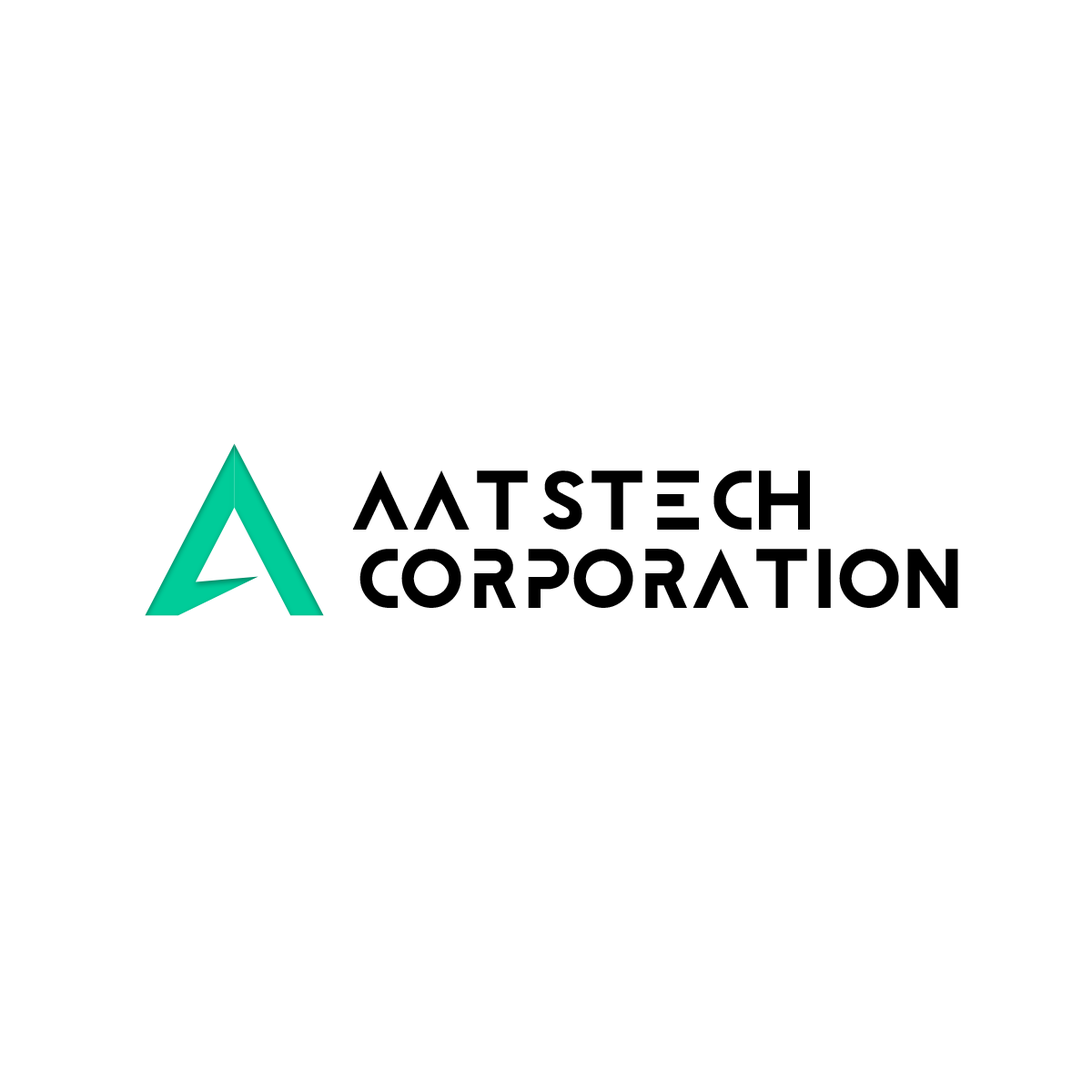
<style>
.page{position:relative;width:1092px;height:1092px;background:#ffffff}
.page>*{position:absolute;margin:0}
.t1{font:65.5px "BIOWEAPON-Regular";color:#000000}
</style>
<div class="page">
<p class="t1" style="left:352px;top:470px;width:606px;height:138px">Aatstech Corporation</p>
</div>
